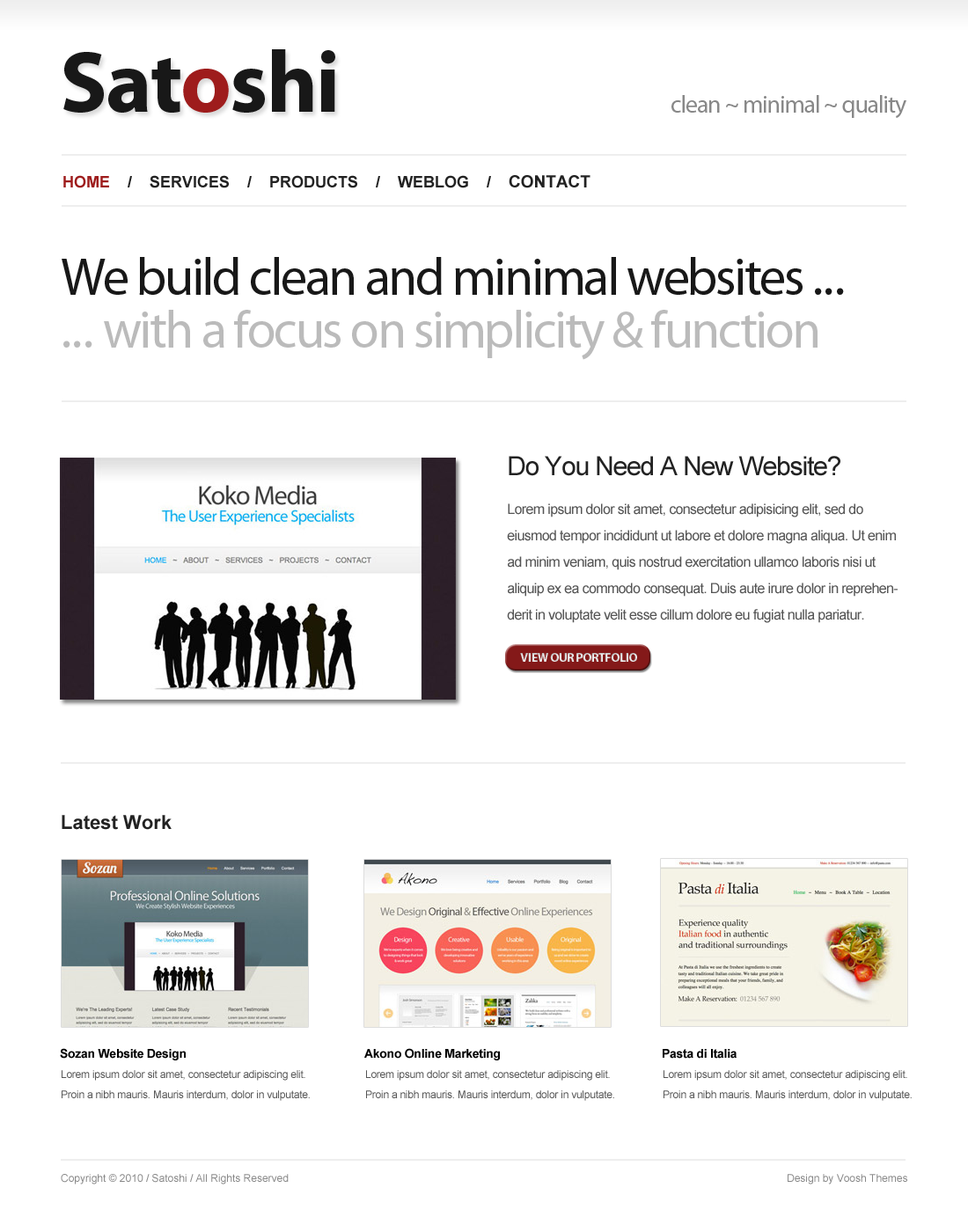
<style>
.page{position:relative;width:968px;height:1232px;background:#ffffff}
.page>*{position:absolute;margin:0}
.t1{font:88px "MyriadPro-Bold";letter-spacing:-0.02em;color:#181818}
.t2{font:88px "MyriadPro-Bold";letter-spacing:-0.02em;color:#9e1c1c}
.t3{font:24.6px "MyriadPro-Regular";letter-spacing:-0.04em;color:#888888}
.t4{font:15.8px "Arial-BoldMT";color:#222222}
.t5{font:15.8px "Arial-BoldMT";color:#9e1c1c}
.t6{font:16.7px "Arial-BoldMT";color:#222222}
.t7{font:52.8px/52.8px "MyriadPro-Regular";letter-spacing:-0.04em;color:#bbbbbb}
.t8{font:52.8px/52.8px "MyriadPro-Regular";letter-spacing:-0.04em;color:#181818}
.t9{font:52.8px/52.8px "MyriadPro-Regular";color:#181818}
.t10{font:52.8px/52.8px "MyriadPro-Regular";color:#bbbbbb}
.t11{font:26.4px "ArialMT";letter-spacing:-0.04em;color:#222222}
.t12{font:14.1px/26.4px "ArialMT";letter-spacing:-0.04em;color:#555555}
.t13{font:12.3px "MyriadPro-Bold";letter-spacing:-0.025em;color:#dfdfdf;text-transform:uppercase}
.t14{font:19.4px "Arial-BoldMT";color:#222222}
.t15{font:12.3px "Arial-BoldMT";letter-spacing:-0.02em;color:#000000}
.t16{font:10.6px/20.4px "ArialMT";letter-spacing:-0.02em;color:#555555}
.t17{font:10.6px "ArialMT";color:#888888}
</style>
<div class="page">
<p class="t1" style="left:63px;top:49px;width:272px;height:64px">Sat<span class="t2">o</span>shi</p>
<p class="t3" style="left:671px;top:95px;width:235px;height:23px">clean ~ minimal ~ quality</p>
<p class="t4" style="left:63px;top:175px;width:527px;height:13px"><span class="t5">HOME    </span>/    SERVICES    /    PRODUCTS    /    WEBLOG    /    <span class="t6">CONTACT</span></p>
<p class="t7" style="left:62px;top:257px;width:782px;height:103px"><span class="t8">We build clean and minimal websites </span><span class="t9">...<br></span><span class="t10">...</span> with a focus on simplicity &amp; function</p>
<p class="t11" style="left:509px;top:456px;width:331px;height:20px">Do You Need A New Website?</p>
<p class="t12" style="left:507px;top:503px;width:391px;height:120px">Lorem ipsum dolor sit amet, consectetur adipisicing elit, sed do eiusmod tempor incididunt ut labore et dolore magna aliqua. Ut enim ad minim veniam, quis nostrud exercitation ullamco laboris nisi ut aliquip ex ea commodo consequat. Duis aute irure dolor in reprehenderit in voluptate velit esse cillum dolore eu fugiat nulla pariatur.</p>
<p class="t13" style="left:520px;top:653px;width:117px;height:9px">VIEW OUR PORTFOLIO</p>
<p class="t14" style="left:62px;top:815px;width:110px;height:15px">Latest Work</p>
<p class="t15" style="left:60px;top:1048px;width:126px;height:12px">Sozan Website Design</p>
<p class="t15" style="left:364px;top:1048px;width:136px;height:12px">Akono Online Marketing</p>
<p class="t15" style="left:663px;top:1049px;width:74px;height:10px">Pasta di Italia</p>
<p class="t16" style="left:62px;top:1070px;width:248px;height:31px">Lorem ipsum dolor sit amet, consectetur adipiscing elit. Proin a nibh mauris. Mauris interdum, dolor in vulputate.</p>
<p class="t16" style="left:366px;top:1070px;width:248px;height:31px">Lorem ipsum dolor sit amet, consectetur adipiscing elit. Proin a nibh mauris. Mauris interdum, dolor in vulputate.</p>
<p class="t16" style="left:663px;top:1070px;width:249px;height:31px">Lorem ipsum dolor sit amet, consectetur adipiscing elit. Proin a nibh mauris. Mauris interdum, dolor in vulputate.</p>
<p class="t17" style="left:61px;top:1174px;width:228px;height:10px">Copyright © 2010 / Satoshi / All Rights Reserved</p>
<p class="t17" style="left:788px;top:1174px;width:119px;height:10px">Design by Voosh Themes</p>
</div>
